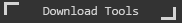
<style>
.page{position:relative;width:182px;height:23px;background:#333333}
.page>*{position:absolute;margin:0}
.t1{font:12.5px "Consolas";color:#d3d3d3}
</style>
<div class="page">
<p class="t1" style="left:43px;top:6px;width:96px;height:9px">Download Tools</p>
</div>
